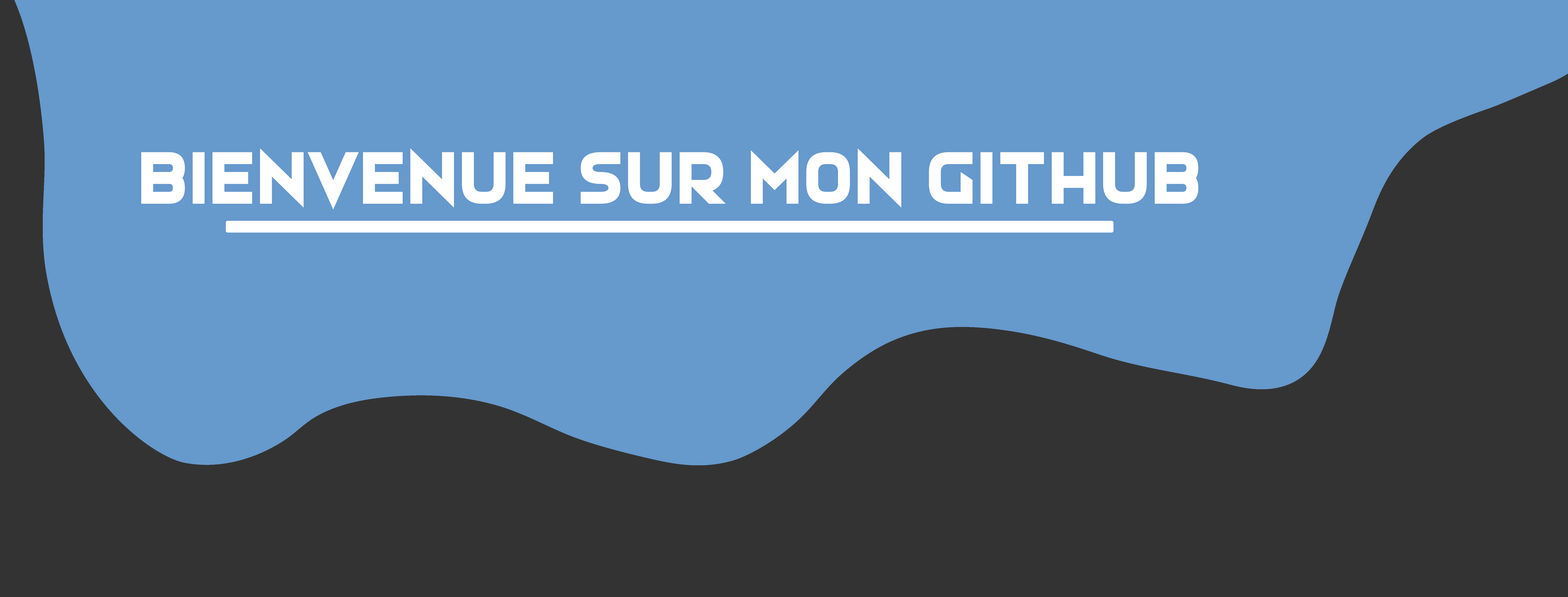
<style>
.page{position:relative;width:1568px;height:597px;background:#6699cc}
.page>*{position:absolute;margin:0}
.t1{font:81.1px "Hardigan";color:#ffffff}
</style>
<div class="page">
<p class="t1" style="left:141px;top:148px;width:1057px;height:61px">Bienvenue sur mon Github</p>
</div>
